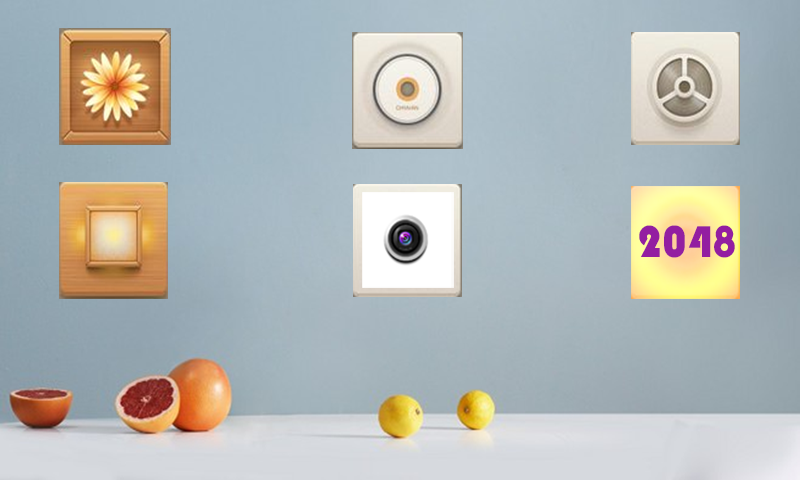
<style>
.page{position:relative;width:800px;height:480px}
.page>*{position:absolute;margin:0}
.t1{font:46.2px "STHupo";color:#931ea1;scale:0.95 1}
</style>
<div class="page">
<p class="t1" style="left:639px;top:225px;width:96px;height:33px">2048</p>
</div>
